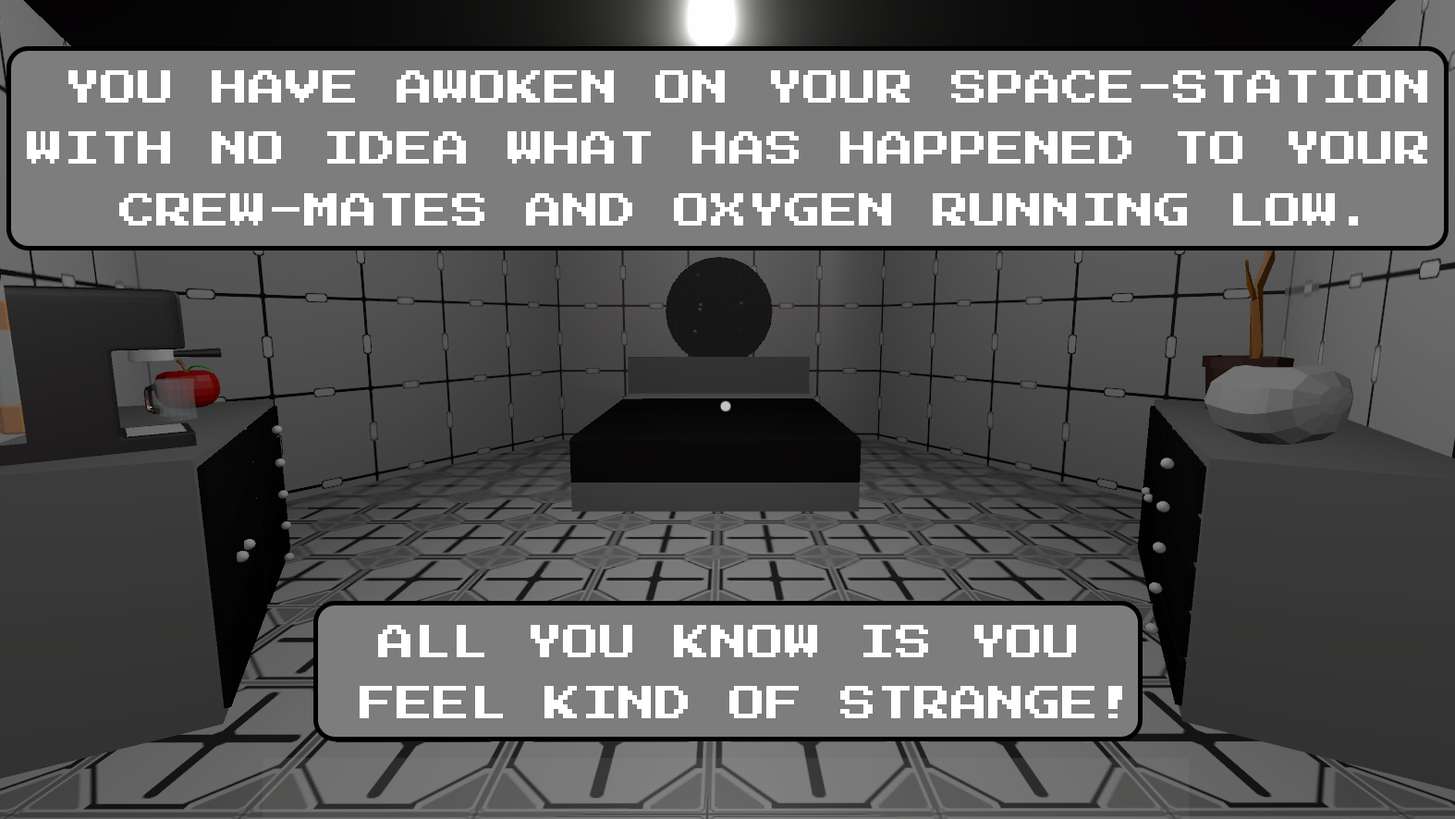
<style>
.page{position:relative;width:1455px;height:819px}
.page>*{position:absolute;margin:0}
.t1{font:37px/61.6px "PressStart2P-Regular";color:#ffffff;text-transform:uppercase}
</style>
<div class="page">
<p class="t1" style="left:27px;top:70px;width:1401px;height:648px;text-align:center">You have awoken on your space-station<br>with no idea what has happened to your <br>crew-mates and oxygen running low.<br><br><br><br><br><br><br>all you know is you <br>feel kind of strange!</p>
</div>
